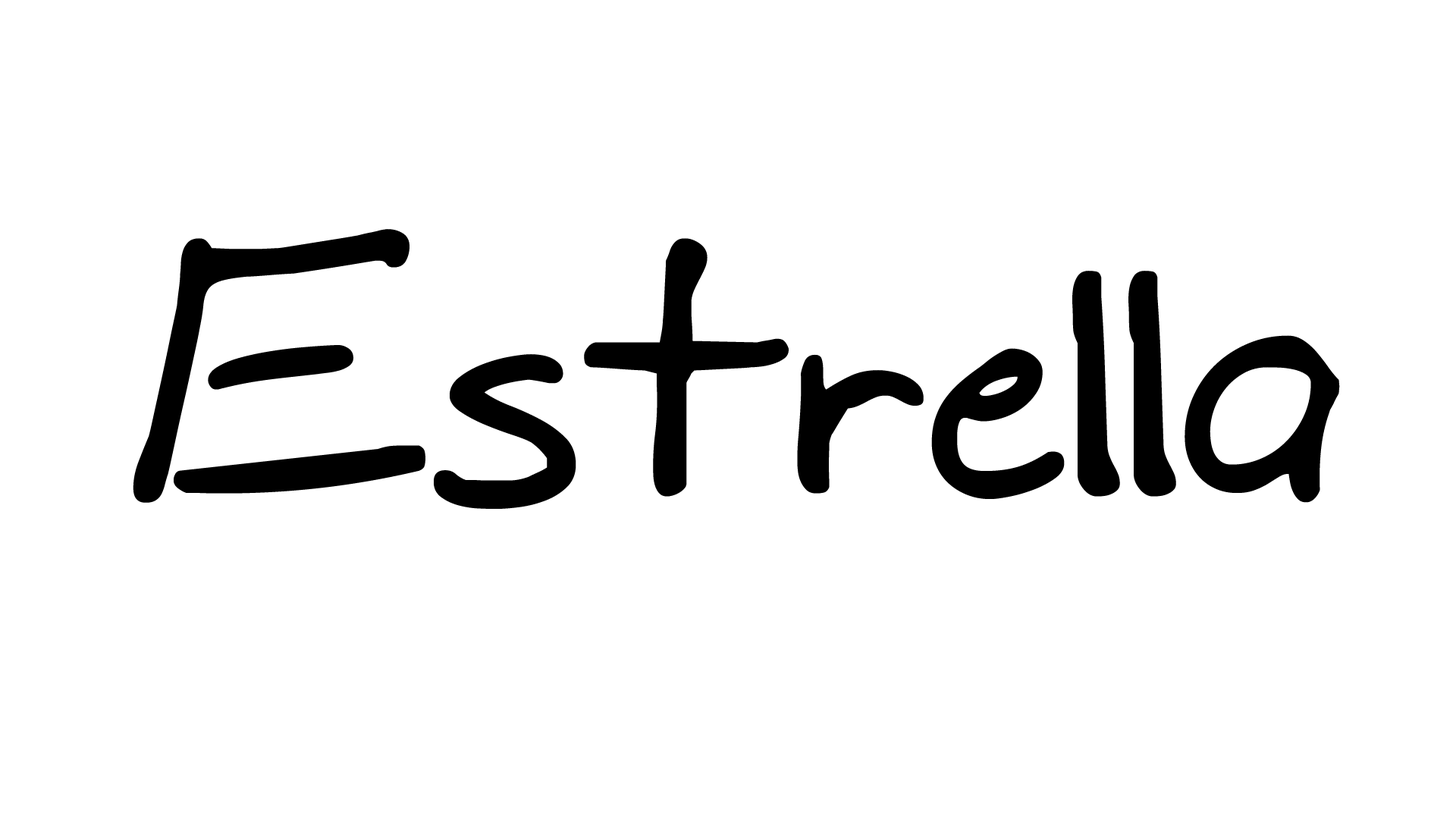
<style>
.page{position:relative;width:1456px;height:819px;background:#ffffff}
.page>*{position:absolute;margin:0}
.t1{font:442.4px "Mad'sScrawl-BRK-";color:#000000}
</style>
<div class="page">
<p class="t1" style="left:133px;top:229px;width:1207px;height:280px">Estrella</p>
</div>
